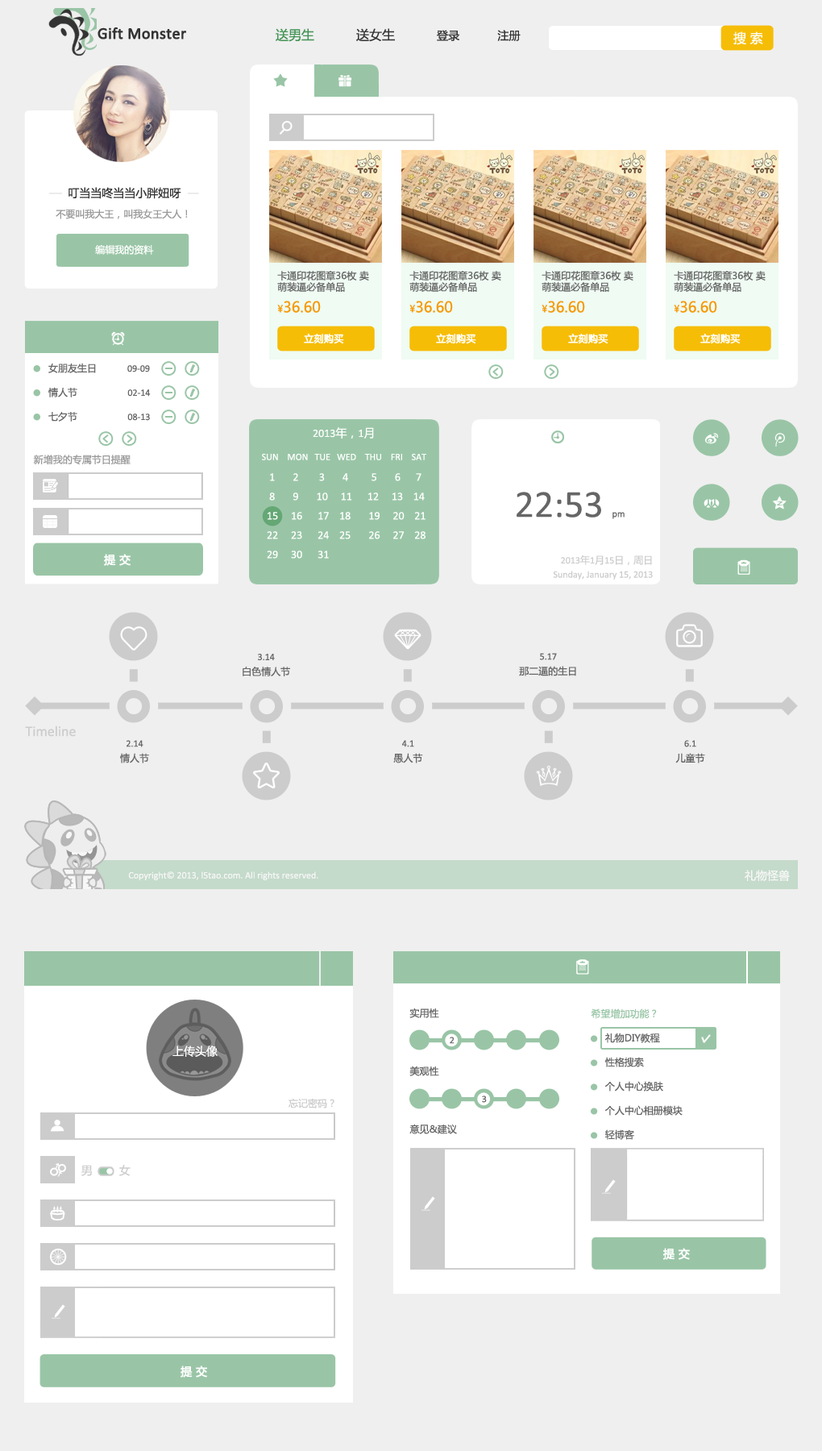
<style>
.page{position:relative;width:822px;height:1451px;background:#efefef}
.page>*{position:absolute;margin:0}
.t1{font:16.1px "Calibri";color:#333333;font-weight:bold}
.t2{font:11.3px "MicrosoftYaHei";color:#333333}
.t3{font:12.9px "MicrosoftYaHei";color:#439355}
.t4{font:12.9px "MicrosoftYaHei";color:#333333}
.t5{font:12.9px "MicrosoftYaHei";color:#ffffff}
.t6{font:9.7px "MicrosoftYaHei";color:#999999}
.t7{font:9.7px "MicrosoftYaHei";color:#ffffff}
.t8{font:9.7px/11.3px "MicrosoftYaHei";color:#666666}
.t9{font:9.7px/8.9px "MicrosoftYaHei";color:#666666}
.t10{font:9.7px/8.9px "MicrosoftYaHei";color:#f69907}
.t11{font:14.5px/8.9px "MicrosoftYaHei";color:#f69907}
.t12{font:9.7px "MicrosoftYaHei";color:#ffffff;font-weight:bold}
.t13{font:9.7px "MicrosoftYaHei";color:#666666}
.t14{font:9.7px "Calibri";color:#666666}
.t15{font:11.3px "Calibri";color:#ffffff}
.t16{font:11.3px "MicrosoftYaHei";color:#ffffff}
.t17{font:11.3px/19.3px "Calibri";color:#ffffff}
.t18{font:9.7px/19.3px "Calibri";color:#ffffff}
.t19{font:38.7px "Calibri";color:#666666}
.t20{font:11.3px "MicrosoftYaHei";color:#ffffff;font-weight:bold}
.t21{font:9.7px/14.5px "Calibri";color:#cccccc}
.t22{font:9.7px/14.5px "MicrosoftYaHei";color:#cccccc}
.t23{font:9.7px/14.5px "MicrosoftYaHei";color:#666666}
.t24{font:9.7px/14.5px "Calibri";color:#666666}
.t25{font:14.5px "Calibri";color:#cccccc}
.t26{font:9.7px "Calibri";color:#ffffff}
.t27{font:9.7px/19.3px "MicrosoftYaHei";color:#666666}
.t28{font:9.7px "MicrosoftYaHei";color:#99c5a6}
.t29{font:9.7px "MicrosoftYaHei";color:#cccccc}
.t30{font:11.3px "MicrosoftYaHei";color:#cccccc}
</style>
<div class="page">
<p class="t1" style="left:98px;top:27px;width:88px;height:12px">Gift Monster</p>
<p class="t2" style="left:276px;top:28px;width:245px;height:14px"><span class="t3">送男生</span><span class="t4">           送女生           </span>登录          注册</p>
<p class="t5" style="left:733px;top:31px;width:30px;height:14px">搜 索</p>
<p class="t2" style="left:69px;top:187px;width:112px;height:12px">叮当当咚当当小胖妞呀</p>
<p class="t6" style="left:56px;top:209px;width:132px;height:10px">不要叫我大王，叫我女王大人！</p>
<p class="t7" style="left:95px;top:244px;width:59px;height:11px">编辑我的资料</p>
<p class="t8" style="left:277px;top:271px;width:92px;height:42px">卡通印花图章36枚 卖<br><span class="t9">萌装逼必备单品<br><br></span><span class="t10">¥</span><span class="t11">36.60</span></p>
<p class="t8" style="left:409px;top:271px;width:92px;height:42px">卡通印花图章36枚 卖<br><span class="t9">萌装逼必备单品<br><br></span><span class="t10">¥</span><span class="t11">36.60</span></p>
<p class="t8" style="left:542px;top:271px;width:91px;height:42px">卡通印花图章36枚 卖<br><span class="t9">萌装逼必备单品<br><br></span><span class="t10">¥</span><span class="t11">36.60</span></p>
<p class="t8" style="left:674px;top:271px;width:92px;height:42px">卡通印花图章36枚 卖<br><span class="t9">萌装逼必备单品<br><br></span><span class="t10">¥</span><span class="t11">36.60</span></p>
<p class="t12" style="left:304px;top:333px;width:40px;height:11px">立刻购买</p>
<p class="t12" style="left:436px;top:333px;width:40px;height:11px">立刻购买</p>
<p class="t12" style="left:568px;top:333px;width:40px;height:11px">立刻购买</p>
<p class="t12" style="left:700px;top:333px;width:41px;height:11px">立刻购买</p>
<p class="t13" style="left:48px;top:363px;width:102px;height:10px">女朋友生日<span class="t14">              09-09</span></p>
<p class="t14" style="left:48px;top:387px;width:103px;height:10px"><span class="t13">情人节</span>                       02-14</p>
<p class="t14" style="left:48px;top:412px;width:102px;height:9px"><span class="t13">七夕节</span>                       08-13</p>
<p class="t15" style="left:313px;top:427px;width:61px;height:11px">2013<span class="t16">年，</span>1<span class="t16">月</span></p>
<p class="t6" style="left:33px;top:455px;width:98px;height:10px">新增我的专属节日提醒</p>
<p class="t17" style="left:262px;top:453px;width:164px;height:105px"><span class="t18">SUN    MON   TUE   WED    THU    FRI    SAT<br></span>   1       2        3       4         5       6      7<br>   8       9       10     11      12     13    14<br>  15     16      17    18       19     20    21<br>  22     23      24    25       26     27    28<br>  29     30      31</p>
<p class="t19" style="left:517px;top:492px;width:108px;height:27px">22:53 <span class="t14">pm</span></p>
<p class="t20" style="left:104px;top:554px;width:27px;height:12px">提 交</p>
<p class="t21" style="left:553px;top:554px;width:100px;height:25px;text-align:right">2013<span class="t22">年</span>1<span class="t22">月</span>15<span class="t22">日，周日<br></span>Sunday, January 15, 2013</p>
<p class="t23" style="left:243px;top:654px;width:47px;height:22px;text-align:center"><span class="t24">3.14<br></span>白色情人节</p>
<p class="t23" style="left:519px;top:653px;width:57px;height:23px;text-align:center"><span class="t24">5.17<br></span>那二逼的生日</p>
<p class="t25" style="left:25px;top:725px;width:51px;height:12px">Timeline</p>
<p class="t24" style="left:120px;top:740px;width:29px;height:23px;text-align:center">2.14<br><span class="t23">情人节</span></p>
<p class="t24" style="left:393px;top:740px;width:30px;height:23px;text-align:center">4.1<br><span class="t23">愚人节</span></p>
<p class="t24" style="left:675px;top:740px;width:30px;height:23px;text-align:center">6.1<br><span class="t23">儿童节</span></p>
<p class="t16" style="left:745px;top:870px;width:45px;height:11px">礼物怪兽</p>
<p class="t26" style="left:128px;top:871px;width:190px;height:9px">Copyright© 2013, l5tao.com. All rights reserved.</p>
<p class="t27" style="left:409px;top:1007px;width:48px;height:127px">实用性<br><br><br>美观性<br><br><br>意见&amp;建议</p>
<p class="t28" style="left:591px;top:1008px;width:66px;height:11px">希望增加功能？</p>
<p class="t14" style="left:450px;top:1036px;width:5px;height:8px">2</p>
<p class="t13" style="left:605px;top:1032px;width:55px;height:11px">礼物DIY教程</p>
<p class="t16" style="left:172px;top:1045px;width:46px;height:12px">上传头像</p>
<p class="t13" style="left:604px;top:1057px;width:40px;height:10px">性格搜索</p>
<p class="t13" style="left:604px;top:1081px;width:59px;height:10px">个人中心换肤</p>
<p class="t29" style="left:289px;top:1098px;width:45px;height:10px">忘记密码？</p>
<p class="t14" style="left:482px;top:1095px;width:5px;height:7px">3</p>
<p class="t13" style="left:604px;top:1105px;width:79px;height:10px">个人中心相册模块</p>
<p class="t13" style="left:605px;top:1129px;width:29px;height:11px">轻博客</p>
<p class="t30" style="left:81px;top:1165px;width:50px;height:11px">男        女</p>
<p class="t20" style="left:662px;top:1248px;width:28px;height:12px">提 交</p>
<p class="t20" style="left:181px;top:1365px;width:26px;height:12px">提 交</p>
</div>
